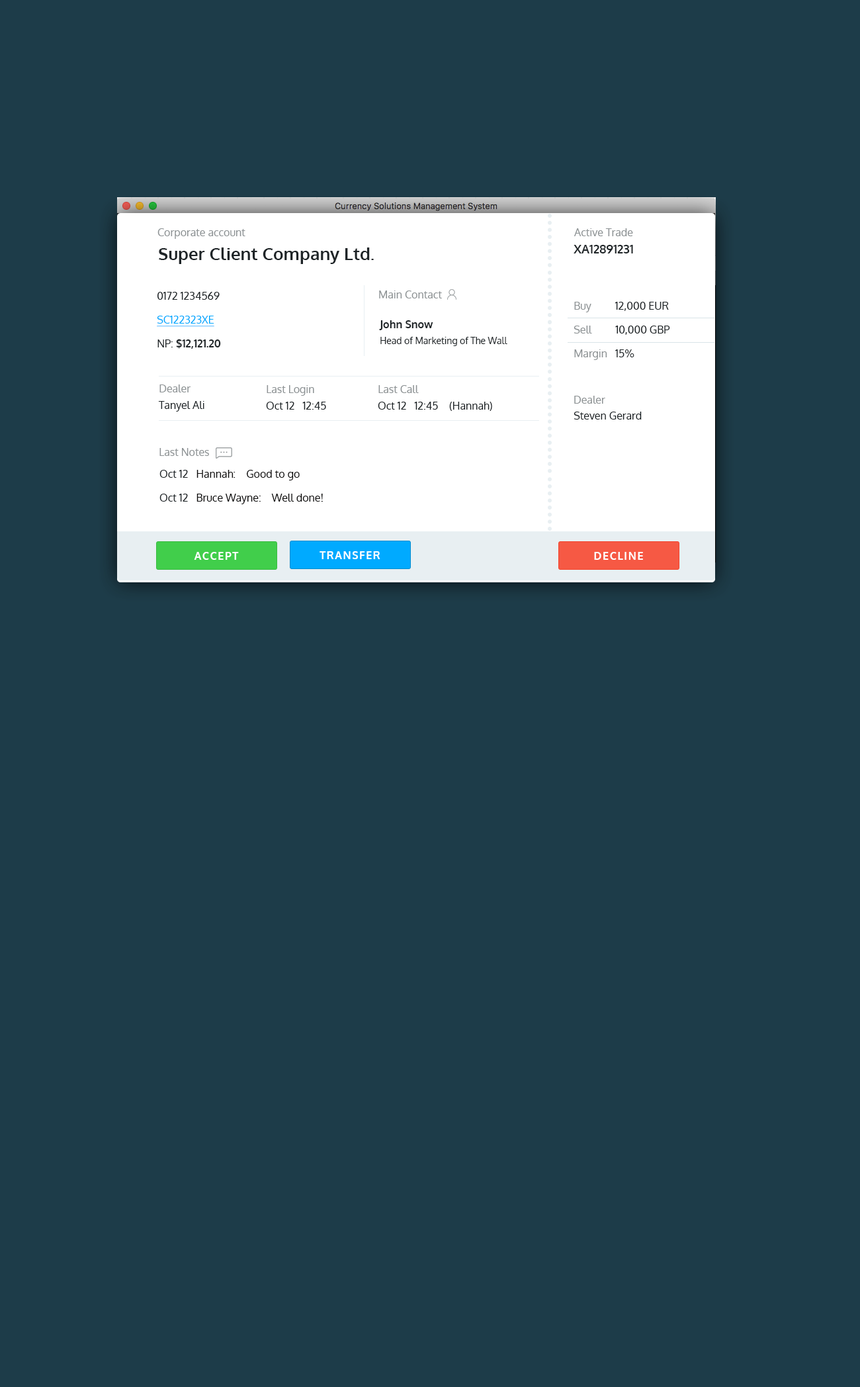
<style>
.page{position:relative;width:860px;height:1387px;background:#1d3c49}
.page>*{position:absolute;margin:0}
.t1{font:10.6px "Oxygen-Regular";color:#8e9395}
.t2{font:11.9px "Oxygen-Bold";color:#1e2427}
.t3{font:17.2px "Oxygen-Bold";color:#1e2427}
.t4{font:10.6px/23.8px "Oxygen-Regular";color:#1e2427}
.t5{font:10.6px/23.8px "Oxygen-Regular";color:#00aaff;text-decoration:underline}
.t6{font:10.6px/23.8px "Oxygen-Bold";color:#1e2427}
.t7{font:10.6px/23.8px "Oxygen-Regular";color:#8e9395}
.t8{font:9.3px/15.9px "Oxygen-Regular";color:#1e2427}
.t9{font:10.6px/31.8px "Oxygen-Regular"}
.t10{font:10.6px/31.8px "Oxygen-Regular";color:#ffffff}
.t11{font:10.6px "Oxygen-Regular";color:#1e2427}
.t12{font:10.6px/23.8px "Oxygen-Regular";color:#0e0d0d}
.t13{font:10.6px/31.8px "Oxygen-Regular";color:#1e2427}
.t14{font:10.6px/31.8px "Oxygen-Regular";color:#0e0d0d}
.t15{font:10.6px "Oxygen-Bold";letter-spacing:0.1em;color:#ffffff;text-transform:uppercase}
</style>
<div class="page">
<p class="t1" style="left:157px;top:228px;width:88px;height:11px">Corporate account</p>
<p class="t1" style="left:574px;top:228px;width:59px;height:8px">Active Trade</p>
<p class="t2" style="left:574px;top:245px;width:59px;height:8px">XA12891231</p>
<p class="t3" style="left:159px;top:247px;width:215px;height:17px">Super Client Company Ltd.</p>
<p class="t4" style="left:157px;top:292px;width:64px;height:57px">0172 1234569<br><span class="t5">SC122323XE<br></span>NP: <span class="t6">$12,121.20</span></p>
<p class="t1" style="left:379px;top:290px;width:63px;height:8px">Main Contact</p>
<p class="t4" style="left:574px;top:302px;width:96px;height:58px"><span class="t7">Buy         </span>12,000 EUR<br><span class="t7">Sell       </span>  10,000 GBP<br><span class="t7">Margin </span>  15%</p>
<p class="t8" style="left:379px;top:320px;width:128px;height:26px"><span class="t6">John Snow<br></span>Head of Marketing of The Wall</p>
<p class="t9" style="left:377px;top:338px;width:115px;height:73px">Tanyel Ali<br>Oct 12   12:45 <br>Oct 12   12:45 (Hannah)</p>
<p class="t10" style="left:265px;top:370px;width:115px;height:73px">Tanyel Ali<br>Oct 12   12:45 <br>Oct 12   12:45 (Hannah)</p>
<p class="t1" style="left:574px;top:396px;width:31px;height:8px">Dealer</p>
<p class="t11" style="left:574px;top:411px;width:68px;height:8px">Steven Gerard</p>
<p class="t1" style="left:159px;top:448px;width:50px;height:8px">Last Notes</p>
<p class="t12" style="left:159px;top:470px;width:164px;height:34px"><span class="t13">Oct 12   </span><span class="t14">Hannah:    Good to go<br></span><span class="t4">Oct 12   </span>Bruce Wayne:    Well done!</p>
<p class="t15" style="left:194px;top:552px;width:45px;height:8px">Accept</p>
<p class="t15" style="left:320px;top:551px;width:60px;height:8px">Transfer</p>
<p class="t15" style="left:594px;top:552px;width:49px;height:8px">Decline</p>
</div>
